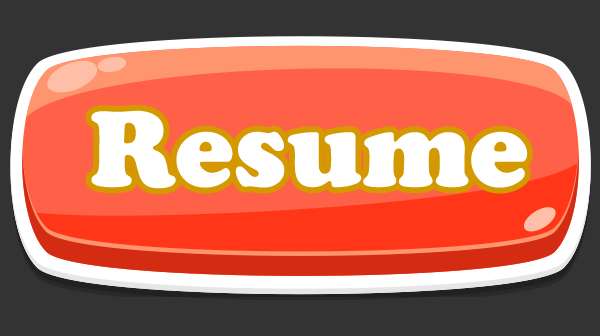
<style>
.page{position:relative;width:600px;height:336px;background:#333333}
.page>*{position:absolute;margin:0}
.t1{font:111.3px "CooperBlack";color:#ffffff}
</style>
<div class="page">
<p class="t1" style="left:91px;top:110px;width:437px;height:79px">Resume</p>
</div>
